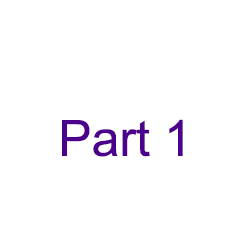
<style>
.page{position:relative;width:250px;height:250px;background:#ffffff}
.page>*{position:absolute;margin:0}
.t1{font:50px "ArialMT";color:#4d008c}
</style>
<div class="page">
<p class="t1" style="left:62px;top:119px;width:121px;height:38px">Part 1</p>
</div>
